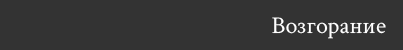
<style>
.page{position:relative;width:403px;height:50px;background:#333333}
.page>*{position:absolute;margin:0}
.t1{font:24px "CrimsonText-Regular";color:#ffffff}
</style>
<div class="page">
<p class="t1" style="left:272px;top:17px;width:114px;height:22px">Возгорание</p>
</div>
